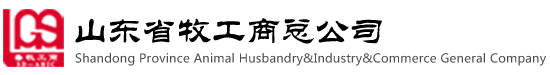
<style>
.page{position:relative;width:550px;height:75px;background:#ffffff}
.page>*{position:absolute;margin:0}
.t1{font:35.1px "FZL2K--GBK1-0";color:#000000}
.t2{font:12px "MicrosoftYaHei";letter-spacing:0.02em;color:#4d4d4d}
</style>
<div class="page">
<p class="t1" style="left:75px;top:18px;width:307px;height:26px">山东省牧工商总公司</p>
<p class="t2" style="left:75px;top:53px;width:471px;height:13px">Shandong Province Animal Husbandry&amp;Industry&amp;Commerce General Company</p>
</div>
